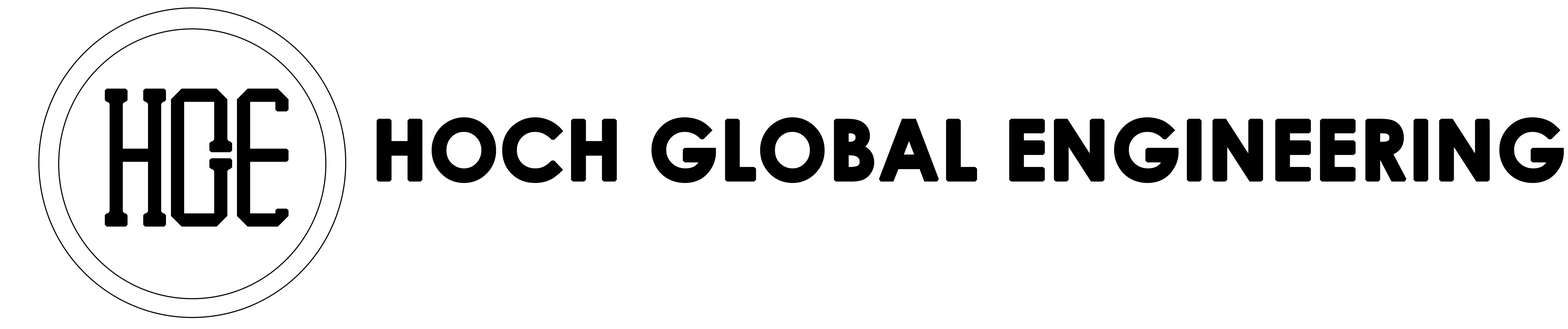
<style>
.page{position:relative;width:1568px;height:329px;background:#ffffff}
.page>*{position:absolute;margin:0}
.t1{font:230.6px "HOCHGE";color:#000000;font-weight:bold}
.t2{font:141.5px "CenturyGothic-Bold";color:#000000;font-weight:bold}
</style>
<div class="page">
<p class="t1" style="left:105px;top:88px;width:184px;height:139px">HGE</p>
<p class="t2" style="left:376px;top:117px;width:1188px;height:66px">HOCH GLOBAL ENGINEERING</p>
</div>
